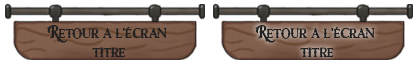
<style>
.page{position:relative;width:420px;height:65px;background:#ffffff}
.page>*{position:absolute;margin:0}
.t1{font:16px "RoseKnight-Regular";color:#212121}
</style>
<div class="page">
<p class="t1" style="left:47px;top:25px;width:120px;height:32px;text-align:center">Retour a l’écran<br> titre</p>
<p class="t1" style="left:255px;top:25px;width:120px;height:32px;text-align:center">Retour a l’écran<br> titre</p>
</div>
